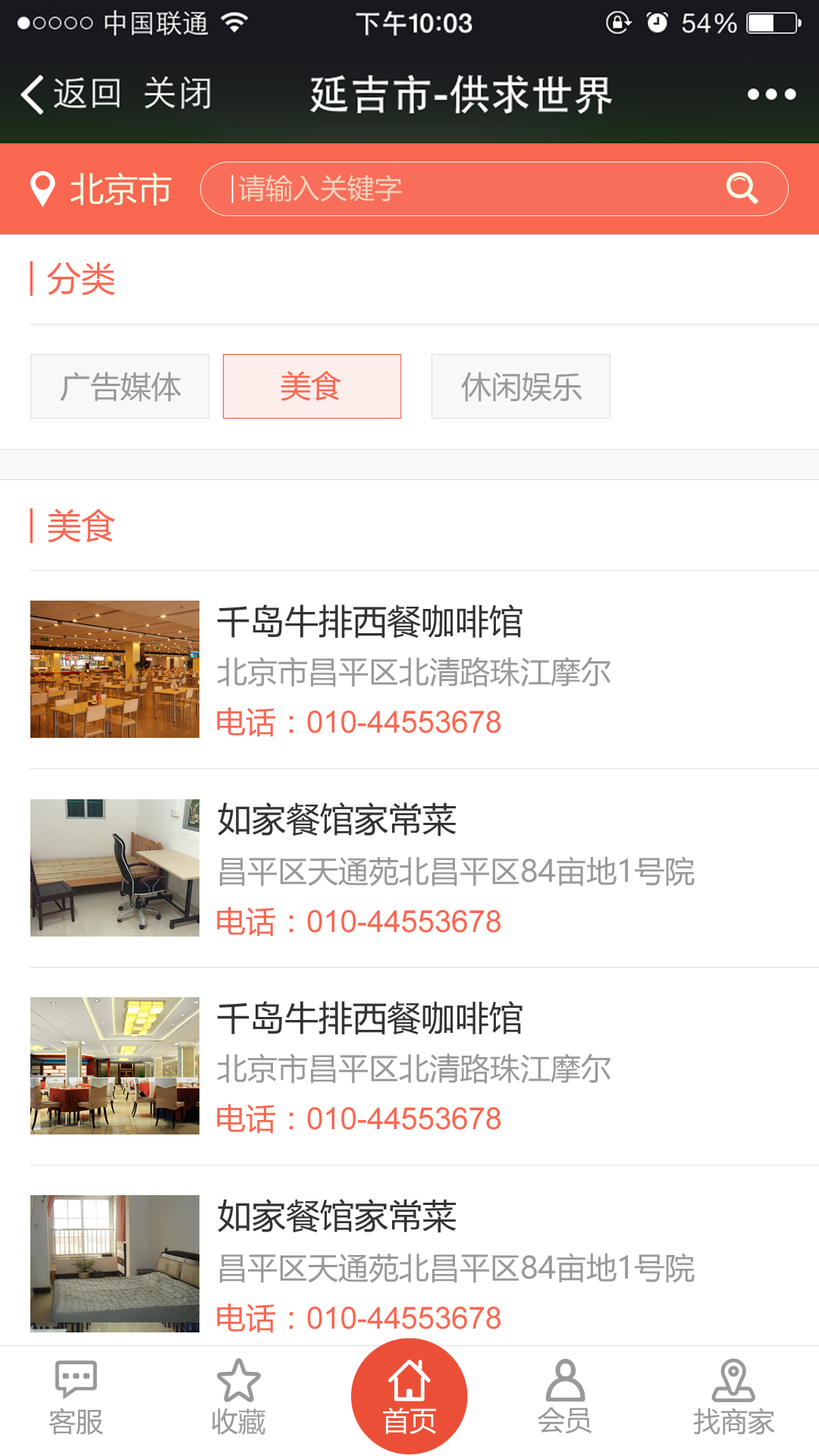
<style>
.page{position:relative;width:819px;height:1456px;background:#ffffff}
.page>*{position:absolute;margin:0}
.t1{font:34.1px "MicrosoftYaHei";color:#eeffe7;text-transform:uppercase}
.t2{font:27.3px "MicrosoftYaHei";color:#f1d4bd;text-transform:uppercase}
.t3{font:34.1px "MicrosoftYaHei";color:#f96751}
.t4{font:30.3px "MicrosoftYaHei";color:#999999}
.t5{font:30.3px "MicrosoftYaHei";color:#f96751}
.t6{font:34.1px "MicrosoftYaHei";color:#333333}
.t7{font:30.3px "ArialMT";color:#f96751}
.t8{font:27.3px "MicrosoftYaHei";color:#999999}
.t9{font:27.3px "MicrosoftYaHei";color:#ffffff}
</style>
<div class="page">
<p class="t1" style="left:70px;top:172px;width:101px;height:34px">北京市</p>
<p class="t2" style="left:238px;top:174px;width:164px;height:28px">请输入关键字</p>
<p class="t3" style="left:47px;top:262px;width:68px;height:34px">分类</p>
<p class="t4" style="left:60px;top:372px;width:121px;height:30px">广告媒体</p>
<p class="t5" style="left:281px;top:371px;width:60px;height:30px">美食</p>
<p class="t4" style="left:461px;top:372px;width:121px;height:30px">休闲娱乐</p>
<p class="t3" style="left:48px;top:509px;width:67px;height:34px">美食</p>
<p class="t6" style="left:217px;top:604px;width:305px;height:35px">千岛牛排西餐咖啡馆</p>
<p class="t4" style="left:217px;top:657px;width:393px;height:30px">北京市昌平区北清路珠江摩尔</p>
<p class="t7" style="left:217px;top:708px;width:283px;height:29px"><span class="t5">电话：</span>010-44553678</p>
<p class="t6" style="left:218px;top:802px;width:239px;height:34px">如家餐馆家常菜</p>
<p class="t4" style="left:220px;top:856px;width:475px;height:30px">昌平区天通苑北昌平区84亩地1号院</p>
<p class="t7" style="left:217px;top:907px;width:283px;height:30px"><span class="t5">电话：</span>010-44553678</p>
<p class="t6" style="left:217px;top:1001px;width:305px;height:34px">千岛牛排西餐咖啡馆</p>
<p class="t4" style="left:217px;top:1053px;width:393px;height:31px">北京市昌平区北清路珠江摩尔</p>
<p class="t7" style="left:217px;top:1104px;width:283px;height:30px"><span class="t5">电话：</span>010-44553678</p>
<p class="t6" style="left:218px;top:1199px;width:239px;height:34px">如家餐馆家常菜</p>
<p class="t4" style="left:220px;top:1253px;width:475px;height:30px">昌平区天通苑北昌平区84亩地1号院</p>
<p class="t7" style="left:217px;top:1304px;width:283px;height:29px"><span class="t5">电话：</span>010-44553678</p>
<p class="t8" style="left:49px;top:1407px;width:54px;height:28px">客服</p>
<p class="t8" style="left:212px;top:1408px;width:53px;height:27px">收藏</p>
<p class="t9" style="left:383px;top:1407px;width:53px;height:27px">首页</p>
<p class="t8" style="left:538px;top:1407px;width:54px;height:27px">会员</p>
<p class="t8" style="left:693px;top:1407px;width:82px;height:28px">找商家</p>
</div>
